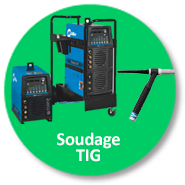
<style>
.page{position:relative;width:185px;height:185px;background:#00cc66}
.page>*{position:absolute;margin:0}
.t1{font:18px/16px "Calibri-Bold";color:#ffffff}
</style>
<div class="page">
<p class="t1" style="left:57px;top:132px;width:63px;height:30px;text-align:center">Soudage  <br>TIG</p>
</div>
